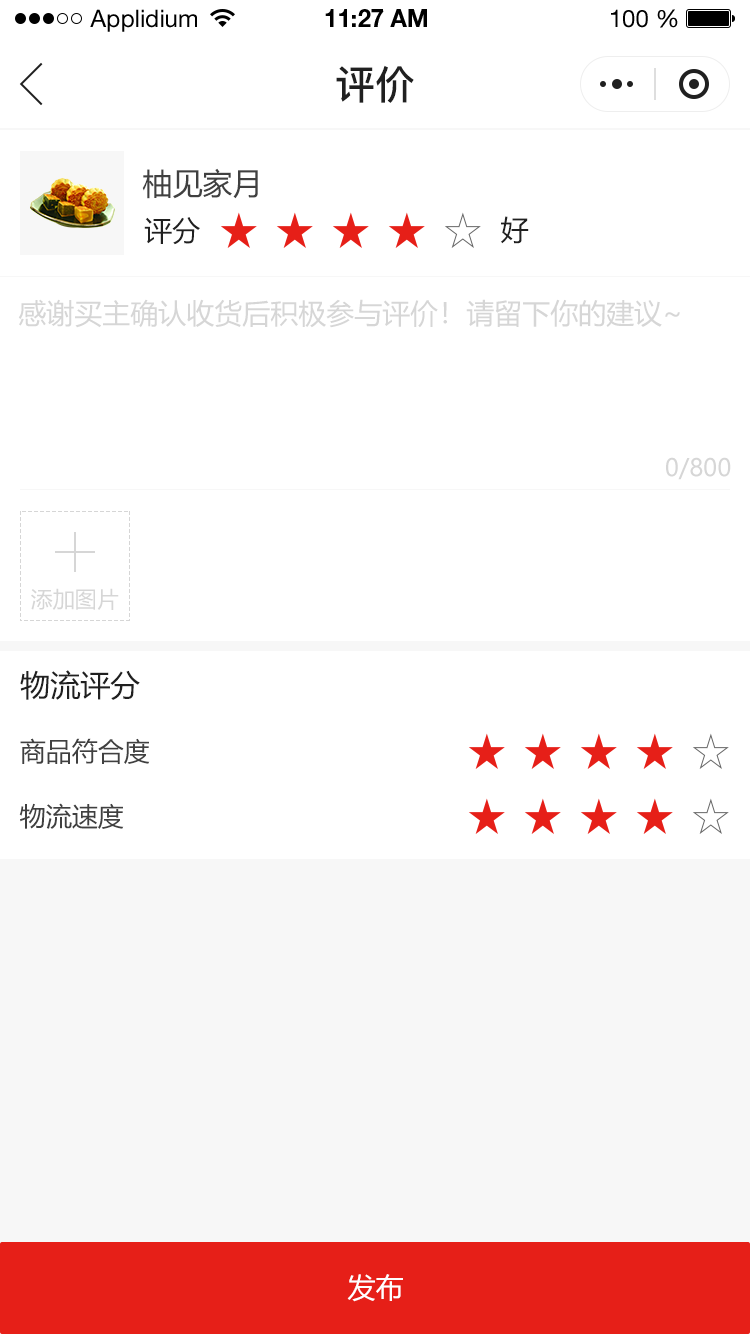
<style>
.page{position:relative;width:750px;height:1334px;background:#ffffff}
.page>*{position:absolute;margin:0}
.t1{font:24px "HelveticaNeueLTStd-Roman";color:#000000}
.t2{font:24px "HelveticaNeueLTStd-Bd";color:#000000}
.t3{font:40px "PingFang-SC-Bold";color:#202020;text-transform:uppercase}
.t4{font:30px "MicrosoftYaHei";color:#404040;text-transform:uppercase}
.t5{font:28px "MicrosoftYaHei";color:#202020;text-transform:uppercase}
.t6{font:28px "MicrosoftYaHei";color:#d6d6d6;text-transform:uppercase}
.t7{font:24px "MicrosoftYaHei";color:#d6d6d6;text-transform:uppercase}
.t8{font:22px "MicrosoftYaHei";color:#d6d6d6;text-transform:uppercase}
.t9{font:30px "MicrosoftYaHei";color:#202020;text-transform:uppercase}
.t10{font:26px "MicrosoftYaHei";color:#404040;text-transform:uppercase}
.t11{font:28px "MicrosoftYaHei";color:#ffffff;text-transform:uppercase}
</style>
<div class="page">
<p class="t1" style="left:90px;top:9px;width:107px;height:23px">Applidium</p>
<p class="t2" style="left:325px;top:9px;width:102px;height:18px">11:27 AM</p>
<p class="t1" style="left:611px;top:9px;width:67px;height:19px">100 %</p>
<p class="t3" style="left:336px;top:65px;width:78px;height:38px">评价</p>
<p class="t4" style="left:142px;top:168px;width:116px;height:31px">柚见家月</p>
<p class="t5" style="left:144px;top:217px;width:56px;height:28px">评分</p>
<p class="t5" style="left:501px;top:216px;width:28px;height:28px">好</p>
<p class="t6" style="left:18px;top:299px;width:662px;height:29px">感谢买主确认收货后积极参与评价！请留下你的建议~</p>
<p class="t7" style="left:666px;top:457px;width:65px;height:23px">0/800</p>
<p class="t8" style="left:31px;top:588px;width:88px;height:22px">添加图片</p>
<p class="t9" style="left:20px;top:670px;width:120px;height:30px">物流评分</p>
<p class="t10" style="left:20px;top:738px;width:130px;height:26px">商品符合度</p>
<p class="t10" style="left:19px;top:803px;width:105px;height:26px">物流速度</p>
<p class="t11" style="left:347px;top:1274px;width:56px;height:28px">发布</p>
</div>
